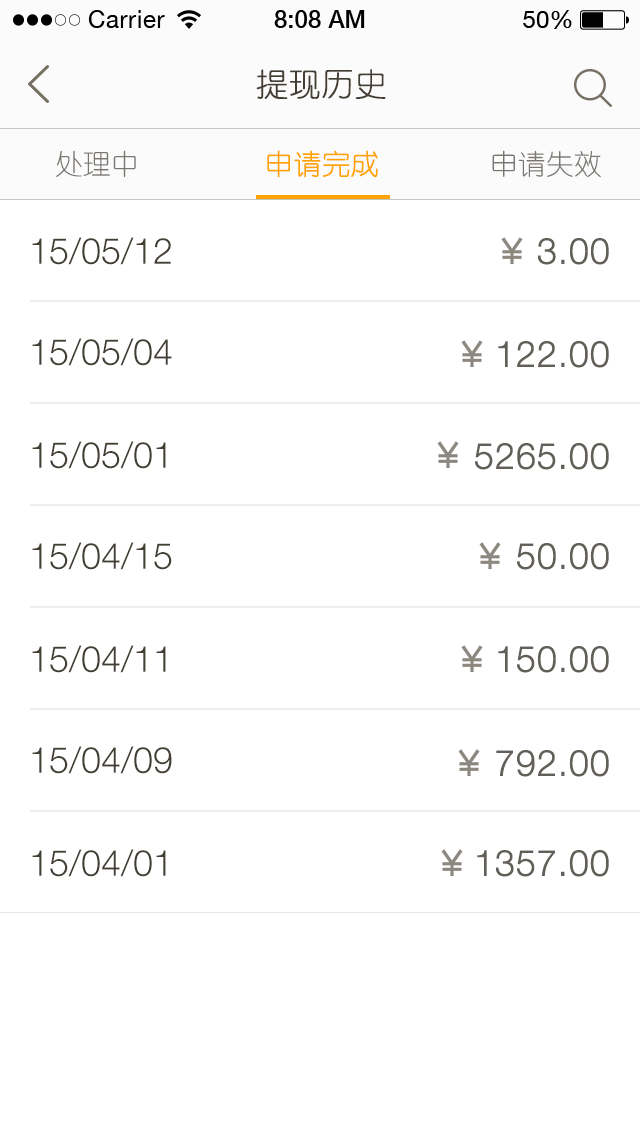
<style>
.page{position:relative;width:640px;height:1136px;background:#ffffff}
.page>*{position:absolute;margin:0}
.t1{font:32px "YouYuan";color:#433d33;text-transform:uppercase;font-weight:bold}
.t2{font:28px "YouYuan";color:#7a7772;text-transform:uppercase}
.t3{font:28px "YouYuan";color:#ffa300;text-transform:uppercase;font-weight:bold}
.t4{font:36px "HelveticaNeueLTPro-Lt";color:#433e34;text-transform:uppercase}
.t5{font:36px "HelveticaNeueLTPro-Lt";color:#625e58;text-transform:uppercase;font-weight:bold}
</style>
<div class="page">
<p class="t1" style="left:256px;top:69px;width:130px;height:30px">提现历史</p>
<p class="t2" style="left:56px;top:150px;width:80px;height:27px">处理中</p>
<p class="t3" style="left:267px;top:150px;width:111px;height:28px">申请完成</p>
<p class="t2" style="left:492px;top:150px;width:109px;height:28px">申请失效</p>
<p class="t4" style="left:32px;top:237px;width:139px;height:28px">15/05/12</p>
<p class="t5" style="left:538px;top:238px;width:71px;height:27px">3.00</p>
<p class="t4" style="left:32px;top:338px;width:140px;height:28px">15/05/04</p>
<p class="t5" style="left:498px;top:341px;width:111px;height:27px">122.00</p>
<p class="t4" style="left:32px;top:441px;width:134px;height:28px">15/05/01</p>
<p class="t5" style="left:475px;top:443px;width:134px;height:27px">5265.00</p>
<p class="t4" style="left:32px;top:542px;width:140px;height:28px">15/04/15</p>
<p class="t5" style="left:517px;top:543px;width:92px;height:27px">50.00</p>
<p class="t4" style="left:32px;top:645px;width:134px;height:28px">15/04/11</p>
<p class="t5" style="left:498px;top:646px;width:111px;height:27px">150.00</p>
<p class="t4" style="left:32px;top:746px;width:140px;height:28px">15/04/09</p>
<p class="t5" style="left:496px;top:750px;width:113px;height:27px">792.00</p>
<p class="t4" style="left:32px;top:849px;width:134px;height:28px">15/04/01</p>
<p class="t5" style="left:477px;top:850px;width:132px;height:27px">1357.00</p>
</div>
